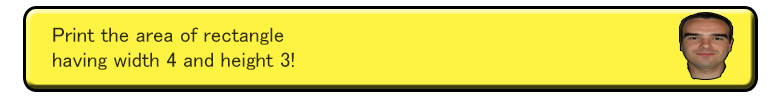
<style>
.page{position:relative;width:770px;height:97px;background:#fef343}
.page>*{position:absolute;margin:0}
.t1{font:21px "MS-PGothic";color:#2e2e0c}
</style>
<div class="page">
<p class="t1" style="left:53px;top:27px;width:241px;height:43px;text-align:right">Print the area of rectangle<br>having width 4 and height 3!</p>
</div>
